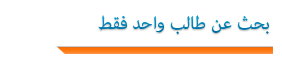
<style>
.page{position:relative;width:282px;height:69px;background:#ffffff}
.page>*{position:absolute;margin:0}
.t1{font:25px "AdobeArabic-Regular";color:#0079ac}
</style>
<div class="page">
<p class="t1" style="left:98px;top:15px;width:171px;height:20px">بحث عن طالب واحد فقط</p>
</div>
